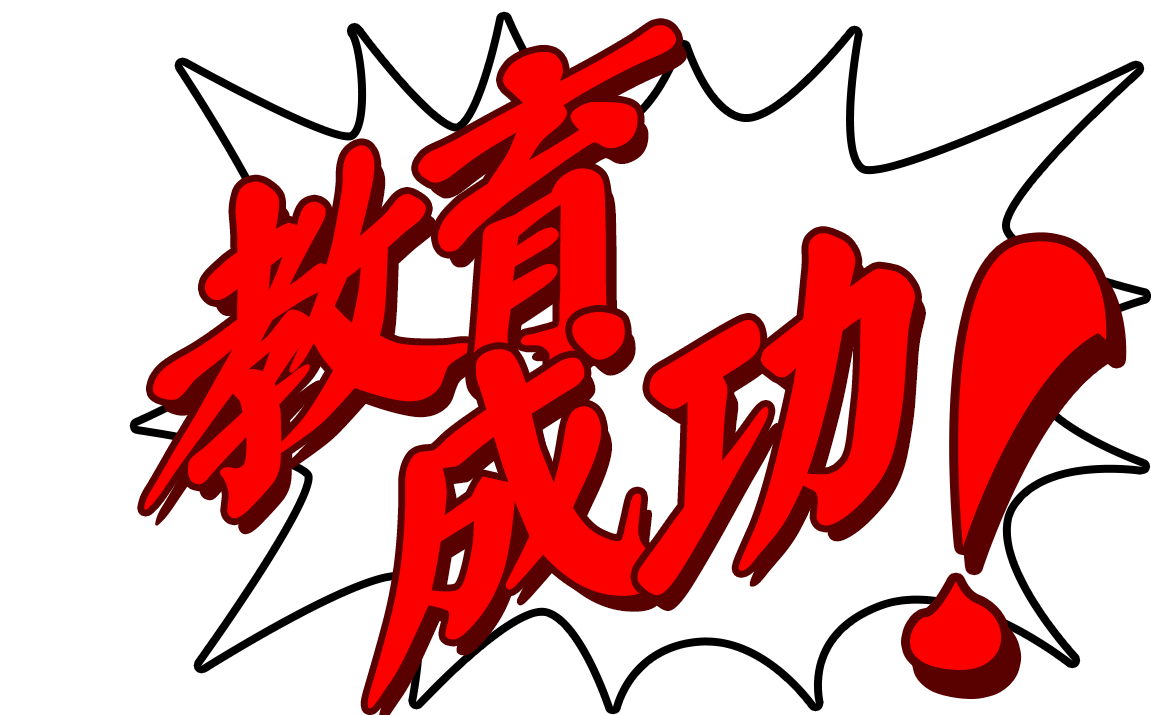
<style>
.page{position:relative;width:1151px;height:715px;background:#ffffff}
.page>*{position:absolute;margin:0}
.t1{font:358px "HYx4gf";letter-spacing:-0.26em;color:#fc0000;font-weight:bold;scale:1.11 1}
.t2{font:358px "HYx4gf";letter-spacing:-0.26em;font-weight:bold;scale:1.11 1}
</style>
<div class="page">
<p class="t1" style="left:418px;top:25px;width:258px;height:373px;rotate:-26deg">育</p>
<p class="t2" style="left:429px;top:41px;width:258px;height:373px;rotate:-26deg">育</p>
<p class="t1" style="left:144px;top:145px;width:328px;height:374px;rotate:-26deg">教</p>
<p class="t2" style="left:155px;top:161px;width:328px;height:374px;rotate:-26deg">教</p>
<p class="t1" style="left:637px;top:233px;width:278px;height:362px;rotate:-26deg">功</p>
<p class="t2" style="left:648px;top:249px;width:278px;height:362px;rotate:-26deg">功</p>
<p class="t1" style="left:367px;top:312px;width:290px;height:397px;rotate:-26deg">成</p>
</div>
